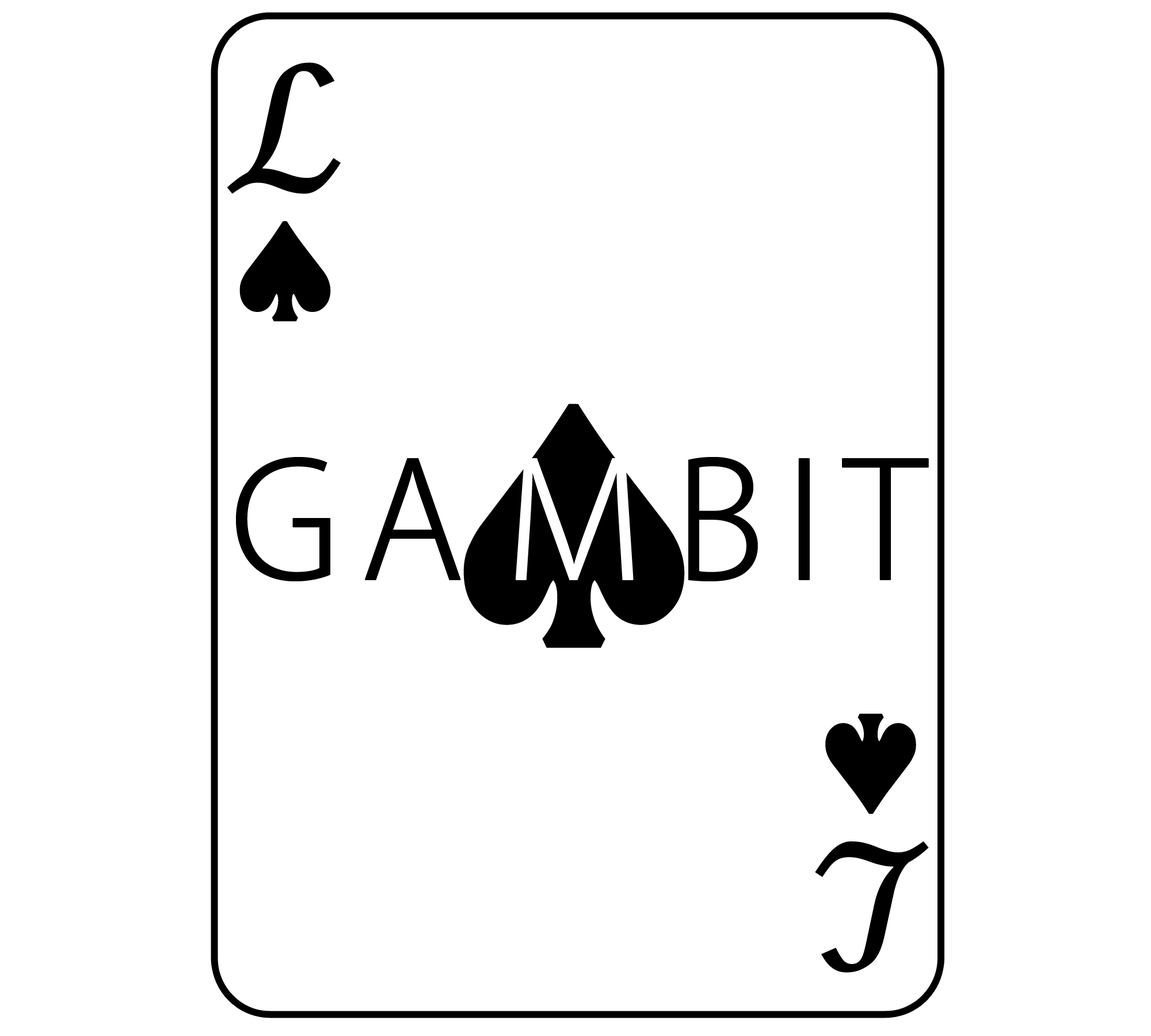
<style>
.page{position:relative;width:1151px;height:1036px;background:#ffffff}
.page>*{position:absolute;margin:0}
.t1{font:191.8px "CambriaMath";letter-spacing:0.1em;color:#000000}
.t2{font:159.5px "KozGoPro-Light";letter-spacing:0.1em;color:#000000;font-weight:bold}
.t3{font:159.5px "KozGoPro-Light";letter-spacing:0.1em;color:#ffffff;font-weight:bold}
</style>
<div class="page">
<p class="t1" style="left:227px;top:62px;width:114px;height:132px">ℒ</p>
<p class="t2" style="left:236px;top:457px;width:225px;height:124px">GA</p>
<p class="t3" style="left:516px;top:458px;width:118px;height:122px">M</p>
<p class="t2" style="left:688px;top:457px;width:241px;height:124px">BIT</p>
<p class="t1" style="left:815px;top:841px;width:114px;height:132px;rotate:180deg">ℒ</p>
</div>
